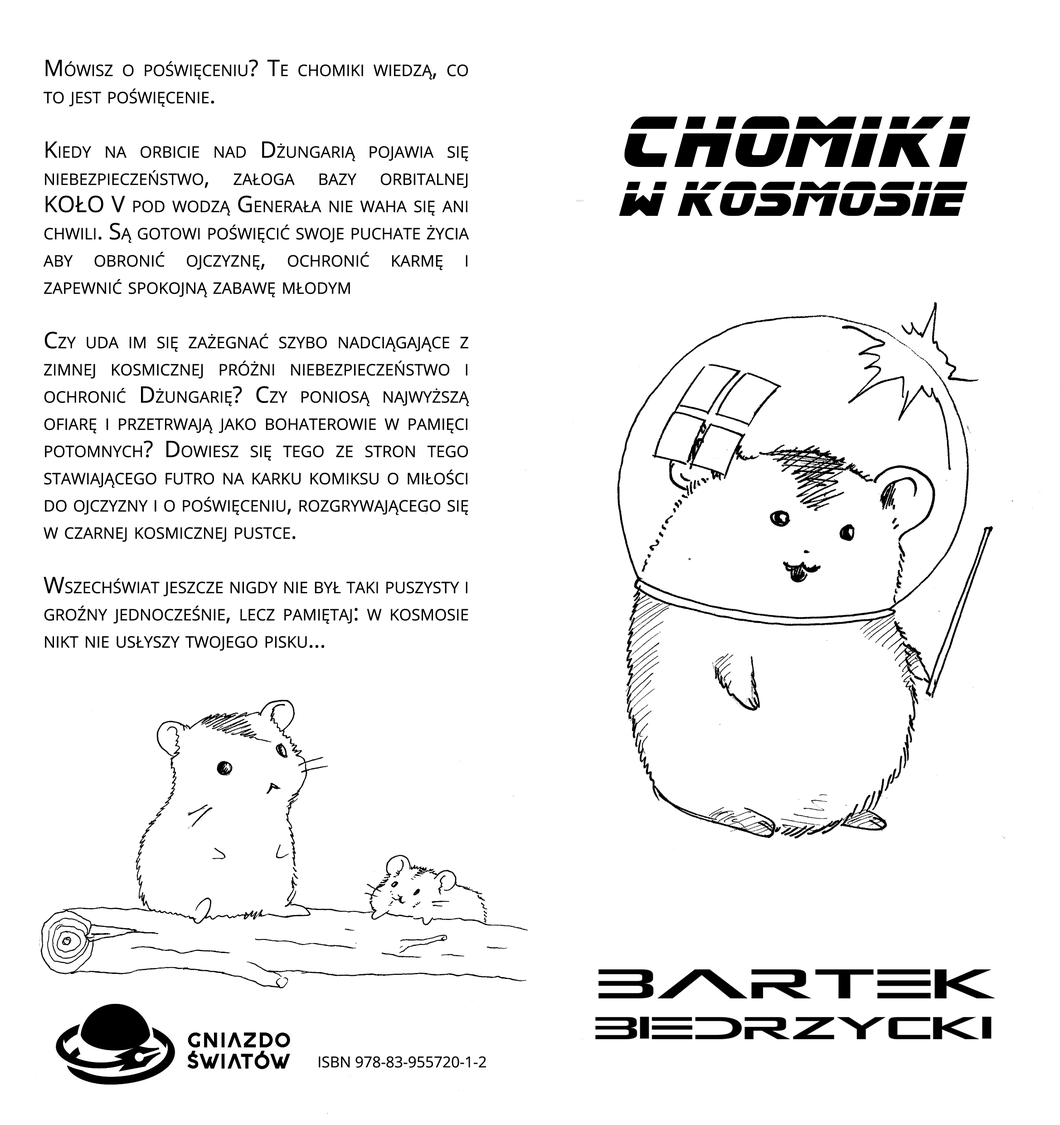
<style>
.page{position:relative;width:1060px;height:1125px;background:#ffffff}
.page>*{position:absolute;margin:0}
.t1{font:22.7px "OpenSans";color:#000000;font-variant:small-caps}
.t2{font:15.1px "OpenSans";color:#000000;font-variant:small-caps}
</style>
<div class="page">
<p class="t1" style="left:43px;top:59px;width:426px;height:592px;text-align:justify">Mówisz o poświęceniu? Te chomiki wiedzą, co to jest poświęcenie.<br><br>Kiedy na orbicie nad Dżungarią pojawia się niebezpieczeństwo, załoga bazy orbitalnej KOŁO V pod wodzą Generała nie waha się ani chwili. Są gotowi poświęcić swoje puchate życia aby obronić ojczyznę, ochronić karmę i zapewnić spokojną zabawę młodym<br><br>Czy uda im się zażegnać szybo nadciągające z zimnej kosmicznej próżni niebezpieczeństwo i ochronić Dżungarię? Czy poniosą najwyższą ofiarę i przetrwają jako bohaterowie w pamięci potomnych? Dowiesz się tego ze stron tego stawiającego futro na karku komiksu o miłości do ojczyzny i o poświęceniu, rozgrywającego się w czarnej kosmicznej pustce.<br><br>Wszechświat jeszcze nigdy nie był taki puszysty i groźny jednocześnie, lecz pamiętaj: w kosmosie nikt nie usłyszy twojego pisku…</p>
<p class="t2" style="left:319px;top:1056px;width:167px;height:12px">ISBN 978-83-955720-1-2</p>
</div>
